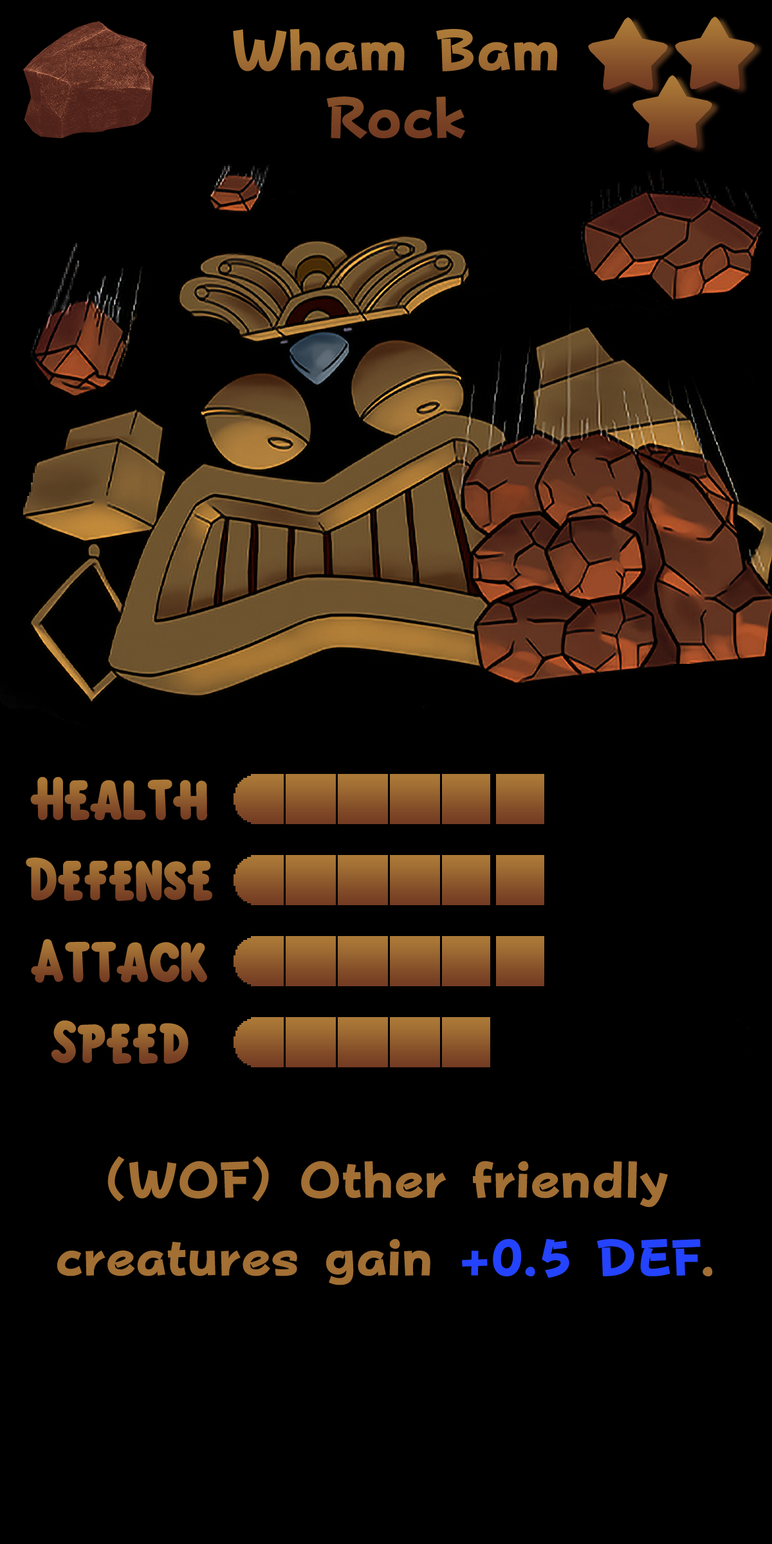
<style>
.page{position:relative;width:772px;height:1544px;background:#000000}
.page>*{position:absolute;margin:0}
.t1{font:98.4px/67.6px "FOTPopHappinessStrp-ExtraBold"}
.t2{font:92.7px "KirbyClassic"}
.t3{font:86.9px "FOTPopHappinessStrp-ExtraBold";color:#a26f34}
.t4{font:86.9px "FOTPopHappinessStrp-ExtraBold";color:#2443ff}
</style>
<div class="page">
<p class="t1" style="left:233px;top:29px;width:325px;height:110px;text-align:center">Wham Bam<br>Rock</p>
<p class="t2" style="left:30px;top:777px;width:178px;height:44px">Health</p>
<p class="t2" style="left:26px;top:858px;width:186px;height:44px">Defense</p>
<p class="t2" style="left:31px;top:939px;width:176px;height:44px">Attack</p>
<p class="t2" style="left:51px;top:1021px;width:138px;height:43px">Speed</p>
<p class="t3" style="left:57px;top:1156px;width:656px;height:130px">(WOF) Other friendly creatures gain <span class="t4">+0.5 DEF</span>.</p>
</div>
